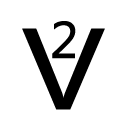
<style>
.page{position:relative;width:128px;height:128px;background:#ffffff}
.page>*{position:absolute;margin:0}
.t1{font:106.5px "MicrosoftYaHei";color:#000000;font-weight:bold;scale:1.17 1}
.t2{font:48px "MicrosoftYaHei";color:#000000;font-weight:bold}
</style>
<div class="page">
<p class="t1" style="left:22px;top:28px;width:83px;height:82px">V</p>
<p class="t2" style="left:52px;top:21px;width:24px;height:38px">2</p>
</div>
